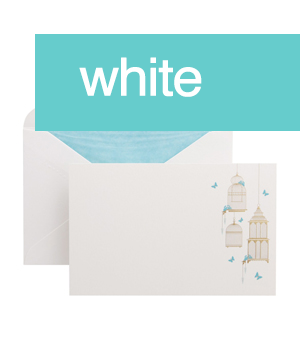
<style>
.page{position:relative;width:300px;height:357px;background:#ffffff}
.page>*{position:absolute;margin:0}
.t1{font:52.6px "Helvetica";letter-spacing:-0.05em;color:#ffffff;font-weight:bold;scale:1.05 1}
</style>
<div class="page">
<p class="t1" style="left:79px;top:57px;width:123px;height:40px">white</p>
</div>
